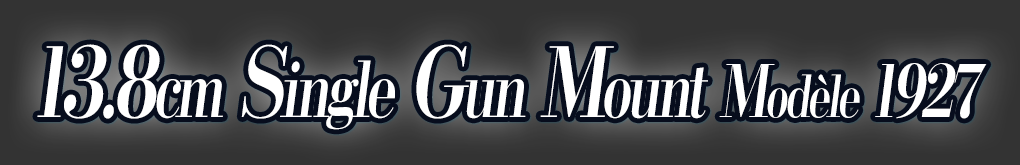
<style>
.page{position:relative;width:1020px;height:165px;background:#333333}
.page>*{position:absolute;margin:0}
.t1{font:76.8px "KochoStd-Heavy";letter-spacing:-0.08em;color:#ffffff;font-style:italic;scale:0.73 1}
.t2{font:96px "KochoStd-Heavy";letter-spacing:-0.08em;color:#ffffff;font-style:italic;scale:0.73 1}
.t3{font:72px "KochoStd-Heavy";letter-spacing:-0.08em;color:#ffffff;font-style:italic;scale:0.73 1}
.t4{font:57.6px "KochoStd-Heavy";letter-spacing:-0.08em;color:#ffffff;font-style:italic;scale:0.73 1}
</style>
<div class="page">
<p class="t1" style="left:37px;top:44px;width:950px;height:86px"><span class="t2">13.8</span>cm<span class="t2"> S</span>ingle<span class="t2"> G</span>un<span class="t2"> M</span>ount <span class="t3">M</span><span class="t4">odèle </span><span class="t3">1927</span></p>
</div>
